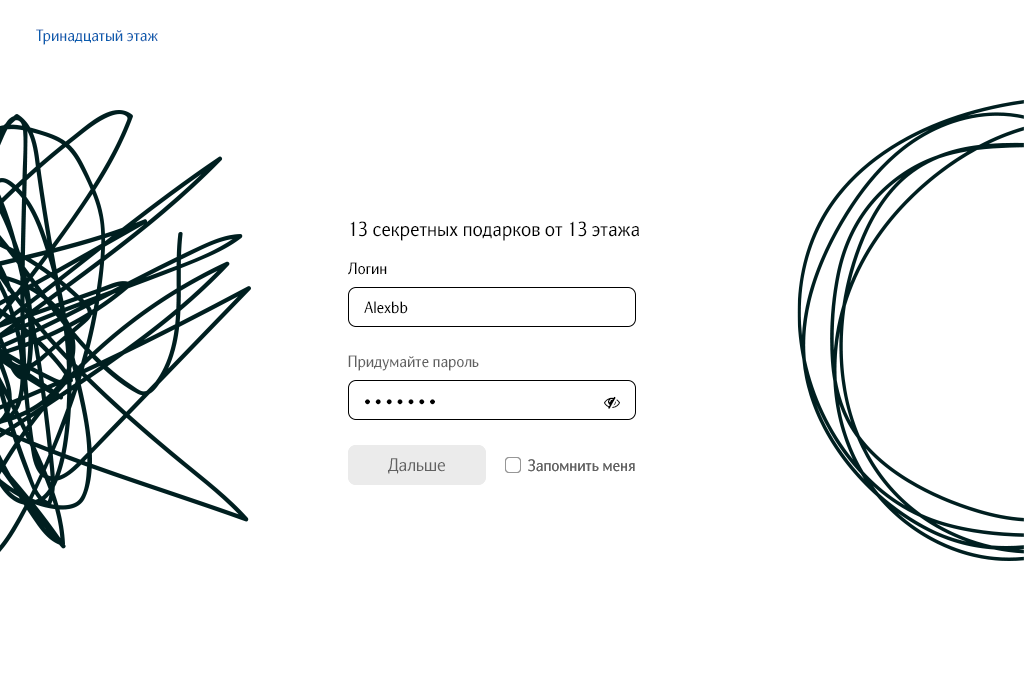
<style>
.page{position:relative;width:1024px;height:700px;background:#ffffff}
.page>*{position:absolute;margin:0}
.t1{font:16px "NatGrotesk-Regular";color:#0b5cae}
.t2{font:20px "NatGrotesk-Regular";color:#000000}
.t3{font:16px "NatGrotesk-Regular";color:#000000}
.t4{font:16px "NatGrotesk-Regular";color:#616161}
.t5{font:18px "NatGrotesk-Regular";color:#616161}
</style>
<div class="page">
<p class="t1" style="left:36px;top:29px;width:122px;height:16px">Тринадцатый этаж</p>
<p class="t2" style="left:350px;top:221px;width:289px;height:20px">13 секретных подарков от 13 этажа</p>
<p class="t3" style="left:348px;top:262px;width:39px;height:13px">Логин</p>
<p class="t3" style="left:364px;top:301px;width:44px;height:13px">Alexbb</p>
<p class="t4" style="left:348px;top:355px;width:131px;height:16px">Придумайте пароль</p>
<p class="t3" style="left:365px;top:399px;width:70px;height:6px">• • • • • • •</p>
<p class="t5" style="left:388px;top:458px;width:57px;height:16px">Дальше</p>
<p class="t5" style="left:388px;top:458px;width:57px;height:16px">Дальше</p>
<p class="t4" style="left:528px;top:459px;width:107px;height:13px">Запомнить меня</p>
<p class="t4" style="left:528px;top:459px;width:107px;height:13px">Запомнить меня</p>
</div>
